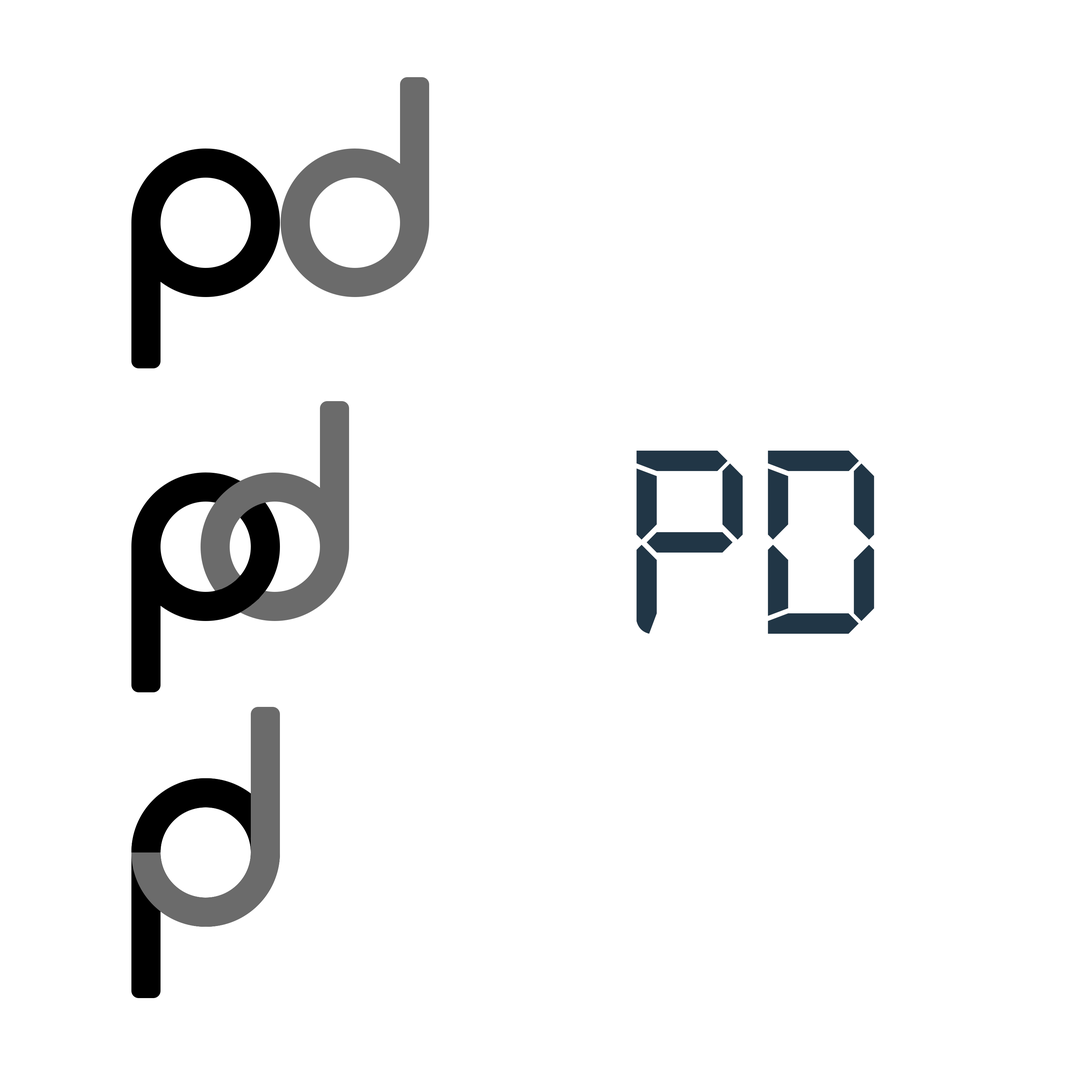
<style>
.page{position:relative;width:1092px;height:1092px;background:#ffffff}
.page>*{position:absolute;margin:0}
.t1{font:479.6px "Digital-7";color:#213646}
</style>
<div class="page">
<p class="t1" style="left:636px;top:451px;width:238px;height:183px">pd</p>
</div>
